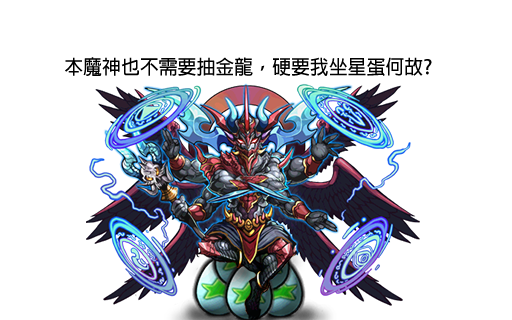
<style>
.page{position:relative;width:512px;height:320px;background:#ffffff}
.page>*{position:absolute;margin:0}
.t1{font:19.7px "AdobeFanHeitiStd-Bold";color:#000000;scale:0.96 1}
</style>
<div class="page">
<p class="t1" style="left:65px;top:57px;width:367px;height:19px">本魔神也不需要抽金龍，硬要我坐星蛋何故?</p>
</div>
